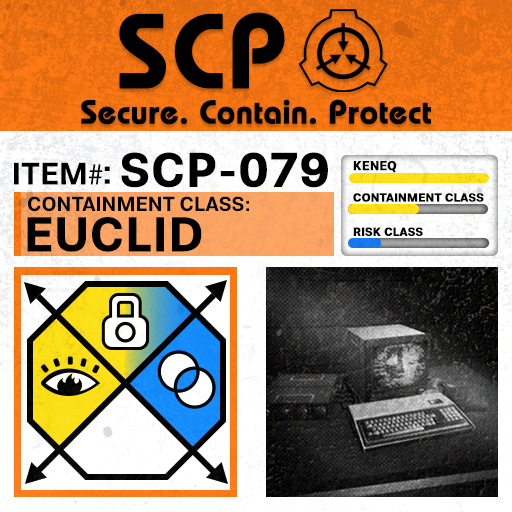
<style>
.page{position:relative;width:512px;height:512px}
.page>*{position:absolute;margin:0}
.t1{font:105.8px "BauhausLT-Demi";color:#000000;font-weight:bold}
.t2{font:33px "BauhausLT-Demi";color:#000000;font-weight:bold}
.t3{font:47.6px "Molde-Semibold";color:#000000;font-weight:bold}
.t4{font:12.5px "Molde-Semibold";color:#000000;font-weight:bold}
.t5{font:31.1px "Molde-Semibold";color:#000000}
.t6{font:31.1px "MyriadPro-Regular";color:#000000}
.t7{font:34.5px "Molde-Semibold";color:#000000}
.t8{font:20.3px "Molde-Semibold";color:#000000}
.t9{font:11.7px "Molde-Semibold";color:#000000;font-weight:bold}
.t10{font:47.8px "Molde-Semibold";color:#000000;font-weight:bold}
</style>
<div class="page">
<p class="t1" style="left:119px;top:12px;width:166px;height:77px">SCP</p>
<p class="t2" style="left:81px;top:99px;width:350px;height:26px">Secure. Contain. Protect</p>
<p class="t3" style="left:121px;top:152px;width:207px;height:36px">SCP-079</p>
<p class="t4" style="left:353px;top:161px;width:44px;height:12px">KENEQ</p>
<p class="t5" style="left:14px;top:162px;width:89px;height:23px">ITEM<span class="t6">#</span></p>
<p class="t7" style="left:104px;top:166px;width:6px;height:18px">:</p>
<p class="t8" style="left:28px;top:196px;width:221px;height:16px">CONTAINMENT CLASS:</p>
<p class="t9" style="left:353px;top:193px;width:131px;height:9px">CONTAINMENT CLASS</p>
<p class="t10" style="left:27px;top:217px;width:175px;height:35px">EUCLID</p>
<p class="t9" style="left:353px;top:227px;width:70px;height:9px">RISK CLASS</p>
</div>
